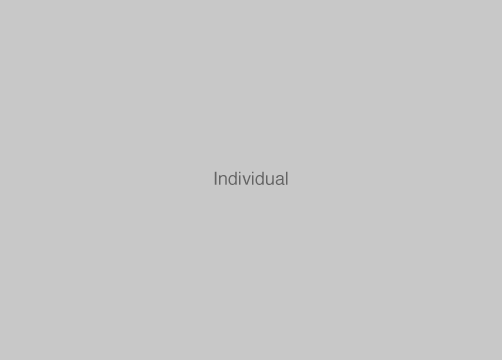
<style>
.page{position:relative;width:502px;height:360px;background:#c8c8c8}
.page>*{position:absolute;margin:0}
.t1{font:18px "Helvetica";color:#646464}
</style>
<div class="page">
<p class="t1" style="left:214px;top:171px;width:74px;height:14px">Individual</p>
</div>
